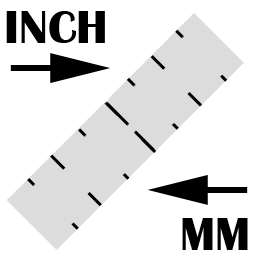
<style>
.page{position:relative;width:256px;height:256px;background:#ffffff}
.page>*{position:absolute;margin:0}
.t1{font:48px "BritannicBold";color:#000000}
</style>
<div class="page">
<p class="t1" style="left:6px;top:11px;width:99px;height:32px">INCH</p>
<p class="t1" style="left:182px;top:218px;width:66px;height:32px">MM</p>
</div>
